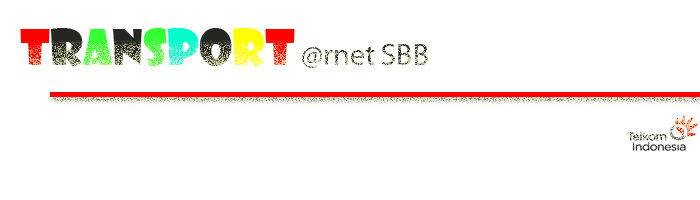
<style>
.page{position:relative;width:700px;height:200px;background:#ffffff}
.page>*{position:absolute;margin:0}
.t1{font:30px "MyriadPro-Regular";color:#252524}
.t2{font:48px "ShowcardGothic-Reg";color:#ff0000}
.t3{font:48px "ShowcardGothic-Reg";color:#252524}
.t4{font:48px "ShowcardGothic-Reg";color:#33ff33}
.t5{font:48px "ShowcardGothic-Reg";color:#00ffcc}
.t6{font:48px "ShowcardGothic-Reg";color:#ffff00}
</style>
<div class="page">
<p class="t1" style="left:20px;top:28px;width:408px;height:40px"><span class="t2">T</span><span class="t3">R</span><span class="t4">A</span><span class="t3">N</span><span class="t4">S</span><span class="t5">P</span><span class="t3">O</span><span class="t6">R</span><span class="t2">T </span>@rnet SBB</p>
</div>
